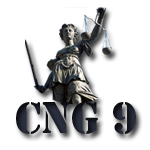
<style>
.page{position:relative;width:150px;height:150px;background:#ffffff}
.page>*{position:absolute;margin:0}
.t1{font:40px "StencilStd";color:#1c1f29}
</style>
<div class="page">
<p class="t1" style="left:16px;top:102px;width:120px;height:32px">CNG 9</p>
</div>
